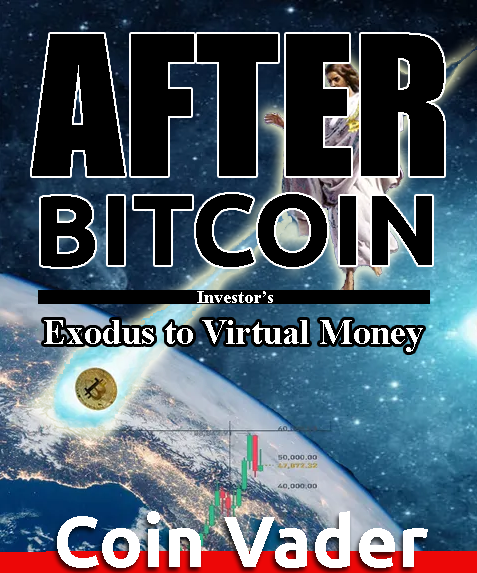
<style>
.page{position:relative;width:477px;height:573px;background:#000000}
.page>*{position:absolute;margin:0}
.t1{font:180px "Impact";color:#000000}
.t2{font:100px "Ubuntu-Bold";color:#000000}
.t3{font:18px "TimesNewRomanPS-BoldMT";color:#ffffff}
.t4{font:36px "TimesNewRomanPS-BoldMT";color:#ffffff}
.t5{font:72px "Ubuntu-Bold";color:#ffffff}
</style>
<div class="page">
<p class="t1" style="left:32px;top:34px;width:412px;height:142px">AFTER</p>
<p class="t2" style="left:41px;top:194px;width:391px;height:73px">BITCOIN</p>
<p class="t3" style="left:197px;top:291px;width:76px;height:12px">Investor’s</p>
<p class="t4" style="left:44px;top:320px;width:379px;height:32px">Exodus to Virtual Money</p>
<p class="t5" style="left:57px;top:511px;width:371px;height:57px">Coin Vader</p>
</div>
